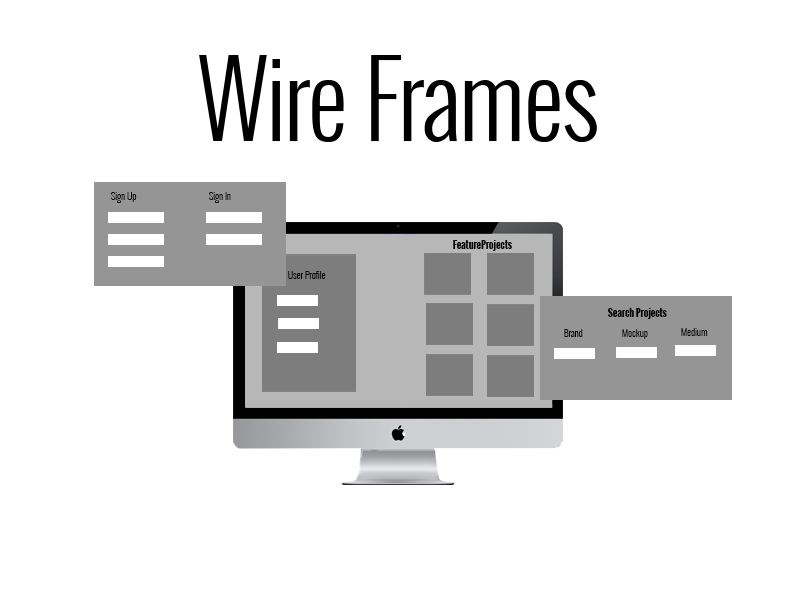
<style>
.page{position:relative;width:800px;height:600px;background:#ffffff}
.page>*{position:absolute;margin:0}
.t1{font:101px "Oswald-Light";letter-spacing:-0.02em;color:#000000}
.t2{font:10px "Oswald-Light";letter-spacing:-0.02em;color:#000000}
.t3{font:10px "Oswald-Bold";letter-spacing:-0.02em;color:#000000}
</style>
<div class="page">
<p class="t1" style="left:199px;top:55px;width:398px;height:87px">Wire Frames</p>
<p class="t2" style="left:111px;top:192px;width:26px;height:11px">Sign Up</p>
<p class="t2" style="left:209px;top:192px;width:22px;height:11px">Sign In</p>
<p class="t3" style="left:453px;top:240px;width:59px;height:11px">FeatureProjects</p>
<p class="t2" style="left:288px;top:271px;width:38px;height:8px">User Profile</p>
<p class="t3" style="left:607px;top:308px;width:60px;height:11px">Search Projects</p>
<p class="t2" style="left:564px;top:329px;width:19px;height:8px">Brand</p>
<p class="t2" style="left:622px;top:329px;width:26px;height:10px">Mockup</p>
<p class="t2" style="left:681px;top:328px;width:27px;height:8px">Medium</p>
</div>
